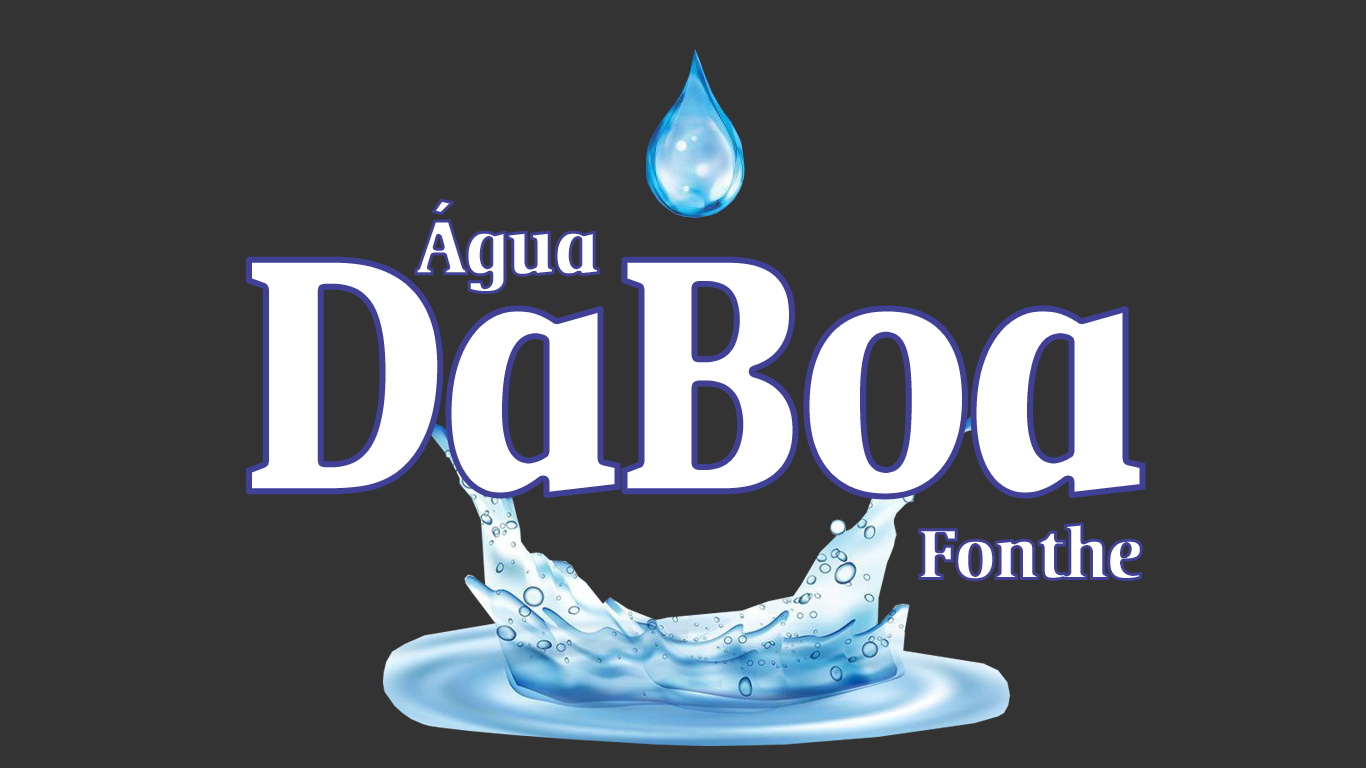
<style>
.page{position:relative;width:1366px;height:768px;background:#333333}
.page>*{position:absolute;margin:0}
.t1{font:90px "OrandaBT-BoldCondensed";letter-spacing:-0.04em;font-weight:bold}
.t2{font:384.4px "OrandaBT-BoldCondensed";letter-spacing:-0.04em;color:#ffffff;font-weight:bold;scale:0.93 1}
.t3{font:83.7px "OrandaBT-BoldCondensed";letter-spacing:-0.04em;font-weight:bold}
</style>
<div class="page">
<p class="t1" style="left:414px;top:199px;width:186px;height:95px">Água</p>
<p class="t2" style="left:246px;top:256px;width:900px;height:244px">DaBoa</p>
<p class="t3" style="left:918px;top:522px;width:225px;height:60px">Fonthe</p>
</div>
